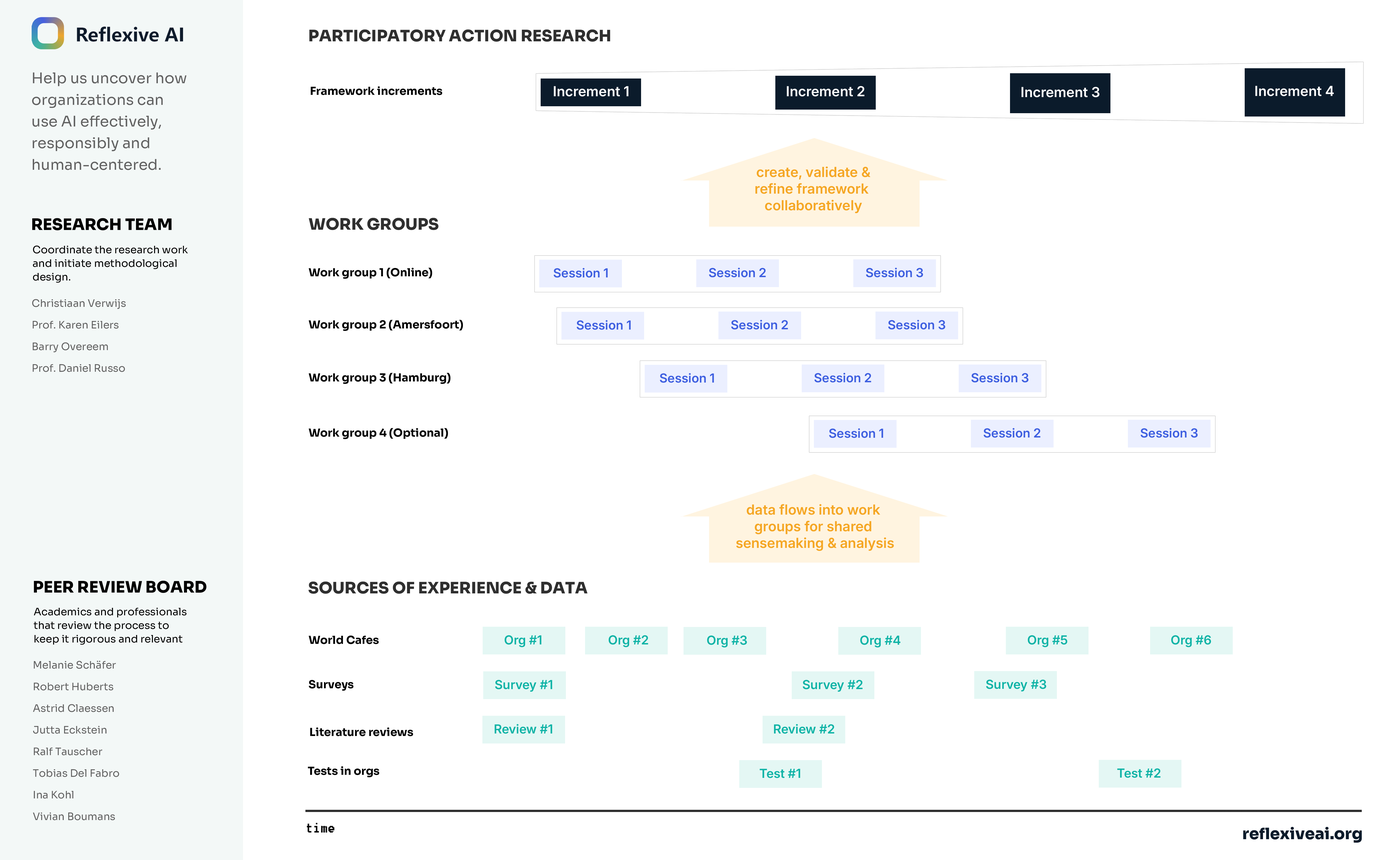
<style>
.page{position:relative;width:1387px;height:860px;background:#ffffff}
.page>*{position:absolute;margin:0}
.t1{font:15.8px "Sora-ExtraBold";color:#2f2f2f}
.t2{font:14.7px/21.6px "Sora-Regular";color:#616161}
.t3{font:11.1px "Sora-Bold";color:#000000}
.t4{font:13.9px "Inter18pt-SemiBold";color:#ffffff}
.t5{font:13.9px/16.6px "Inter18pt-SemiBold";color:#f5a623}
.t6{font:15.8px "Sora-ExtraBold";color:#000000}
.t7{font:10.3px/13.6px "Sora-Regular";color:#000000}
.t8{font:12.5px "Inter18pt-SemiBold";color:#3e5fe0}
.t9{font:10.3px/21.6px "Sora-Regular";color:#616161}
.t10{font:12.5px "Inter18pt-SemiBold";color:#0fb3a6}
.t11{font:15.8px "8514oem";color:#000000}
.t12{font:15.8px "Sora-ExtraBold";color:#0b1b2b}
</style>
<div class="page">
<p class="t1" style="left:309px;top:29px;width:301px;height:13px">PARTICIPATORY ACTION RESEARCH</p>
<p class="t2" style="left:32px;top:72px;width:154px;height:98px">Help us uncover how organizations can use AI effectively, responsibly and human-centered.</p>
<p class="t3" style="left:311px;top:86px;width:131px;height:9px">Framework increments</p>
<p class="t4" style="left:554px;top:86px;width:75px;height:11px">Increment 1</p>
<p class="t4" style="left:787px;top:86px;width:77px;height:11px">Increment 2</p>
<p class="t4" style="left:1021px;top:87px;width:78px;height:10px">Increment 3</p>
<p class="t4" style="left:1255px;top:86px;width:79px;height:10px">Increment 4</p>
<p class="t5" style="left:755px;top:166px;width:115px;height:47px;text-align:center">create, validate &amp;<br>refine framework <br>collaboratively</p>
<p class="t6" style="left:32px;top:218px;width:140px;height:12px">RESEARCH TEAM</p>
<p class="t1" style="left:309px;top:218px;width:130px;height:12px">WORK GROUPS</p>
<p class="t7" style="left:33px;top:245px;width:155px;height:38px">Coordinate the research work and initiate methodological design.</p>
<p class="t3" style="left:308px;top:268px;width:124px;height:11px">Work group 1 (Online)</p>
<p class="t8" style="left:554px;top:268px;width:54px;height:10px">Session 1</p>
<p class="t8" style="left:709px;top:268px;width:57px;height:9px">Session 2</p>
<p class="t8" style="left:866px;top:268px;width:57px;height:9px">Session 3</p>
<p class="t9" style="left:32px;top:299px;width:94px;height:73px">Christiaan Verwijs<br>Prof. Karen Eilers<br>Barry Overeem<br>Prof. Daniel Russo</p>
<p class="t3" style="left:308px;top:320px;width:155px;height:11px">Work group 2 (Amersfoort)</p>
<p class="t8" style="left:577px;top:320px;width:54px;height:10px">Session 1</p>
<p class="t8" style="left:731px;top:320px;width:57px;height:10px">Session 2</p>
<p class="t8" style="left:888px;top:320px;width:57px;height:10px">Session 3</p>
<p class="t3" style="left:308px;top:373px;width:142px;height:11px">Work group 3 (Hamburg)</p>
<p class="t8" style="left:660px;top:373px;width:54px;height:10px">Session 1</p>
<p class="t8" style="left:814px;top:373px;width:57px;height:9px">Session 2</p>
<p class="t8" style="left:971px;top:373px;width:57px;height:9px">Session 3</p>
<p class="t3" style="left:308px;top:428px;width:140px;height:11px">Work group 4 (Optional)</p>
<p class="t8" style="left:829px;top:428px;width:54px;height:10px">Session 1</p>
<p class="t8" style="left:984px;top:428px;width:56px;height:10px">Session 2</p>
<p class="t8" style="left:1141px;top:428px;width:57px;height:10px">Session 3</p>
<p class="t5" style="left:736px;top:504px;width:158px;height:47px;text-align:center">data flows into work <br>groups for shared <br>sensemaking &amp; analysis</p>
<p class="t6" style="left:34px;top:581px;width:172px;height:12px">PEER REVIEW BOARD</p>
<p class="t1" style="left:308px;top:581px;width:279px;height:13px">SOURCES OF EXPERIENCE &amp; DATA</p>
<p class="t7" style="left:34px;top:607px;width:153px;height:38px">Academics and professionals that review the process to keep it rigorous and relevant</p>
<p class="t3" style="left:308px;top:635px;width:71px;height:9px">World Cafes</p>
<p class="t10" style="left:505px;top:635px;width:36px;height:12px">Org #1</p>
<p class="t10" style="left:609px;top:635px;width:39px;height:12px">Org #2</p>
<p class="t10" style="left:707px;top:635px;width:40px;height:12px">Org #3</p>
<p class="t10" style="left:860px;top:635px;width:40px;height:12px">Org #4</p>
<p class="t10" style="left:1028px;top:635px;width:39px;height:12px">Org #5</p>
<p class="t10" style="left:1171px;top:635px;width:40px;height:12px">Org #6</p>
<p class="t9" style="left:33px;top:660px;width:86px;height:160px">Melanie Schäfer<br>Robert Huberts<br>Astrid Claessen<br>Jutta Eckstein<br>Ralf Tauscher<br>Tobias Del Fabro<br>Ina Kohl<br>Vivian Boumans</p>
<p class="t3" style="left:309px;top:680px;width:44px;height:11px">Surveys</p>
<p class="t10" style="left:495px;top:680px;width:57px;height:12px">Survey #1</p>
<p class="t10" style="left:803px;top:680px;width:60px;height:12px">Survey #2</p>
<p class="t10" style="left:986px;top:679px;width:60px;height:12px">Survey #3</p>
<p class="t10" style="left:495px;top:724px;width:57px;height:10px">Review #1</p>
<p class="t10" style="left:774px;top:724px;width:60px;height:10px">Review #2</p>
<p class="t3" style="left:310px;top:727px;width:103px;height:9px">Literature reviews</p>
<p class="t3" style="left:308px;top:766px;width:71px;height:11px">Tests in orgs</p>
<p class="t10" style="left:759px;top:769px;width:41px;height:9px">Test #1</p>
<p class="t10" style="left:1117px;top:768px;width:43px;height:10px">Test #2</p>
<p class="t11" style="left:307px;top:823px;width:28px;height:9px">time</p>
<p class="t12" style="left:1243px;top:827px;width:119px;height:16px">reflexiveai.org</p>
</div>
